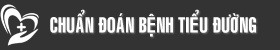
<style>
.page{position:relative;width:280px;height:50px;background:#333333}
.page>*{position:absolute;margin:0}
.t1{font:20.8px "VNI-Swiss-Condense-Bold";color:#ffffff;scale:0.77 1}
</style>
<div class="page">
<p class="t1" style="left:50px;top:9px;width:206px;height:28px">CHUAÅN ÑOAÙN BEÄNH TIEÅU ÑÖÔØNG</p>
</div>
